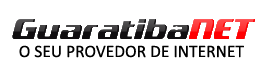
<style>
.page{position:relative;width:270px;height:71px;background:#ffffff}
.page>*{position:absolute;margin:0}
.t1{font:17.5px "Calibri";color:#000000}
</style>
<div class="page">
<p class="t1" style="left:19px;top:45px;width:225px;height:13px">O SEU PROVEDOR DE INTERNET</p>
</div>
